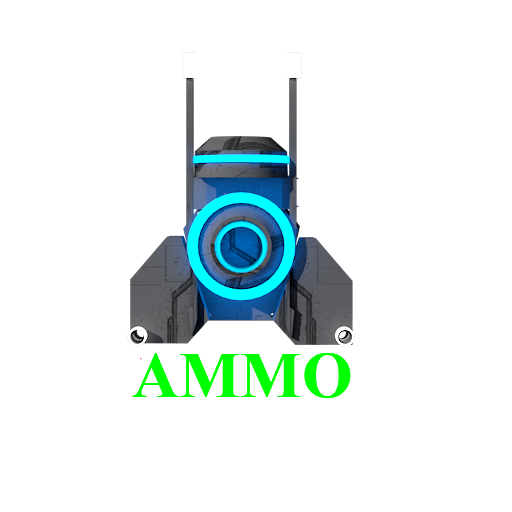
<style>
.page{position:relative;width:512px;height:512px;background:#ffffff}
.page>*{position:absolute;margin:0}
.t1{font:65px "TimesNewRomanPS-BoldMT";color:#00ff00}
</style>
<div class="page">
<p class="t1" style="left:132px;top:353px;width:219px;height:45px">AMMO</p>
<p class="t1" style="left:132px;top:353px;width:219px;height:45px">AMMO</p>
</div>
